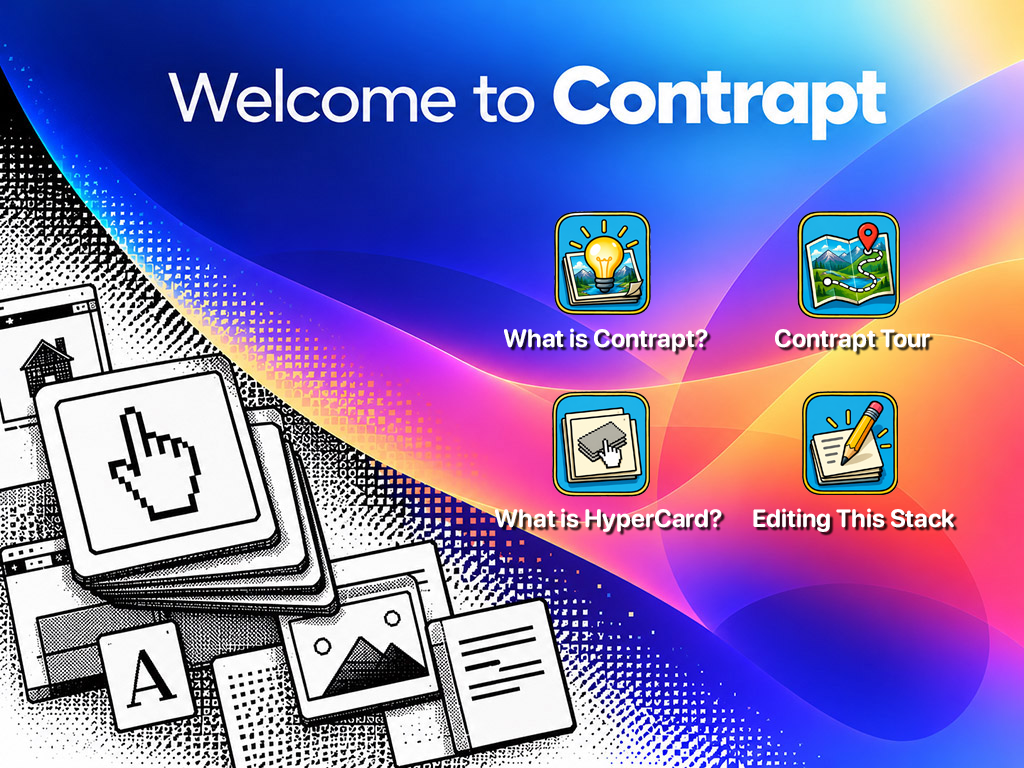
<style>
.page{position:relative;width:1024px;height:768px}
.page>*{position:absolute;margin:0}
.t1{font:25px "SFProRounded-Bold";color:#ffffff}
</style>
<div class="page">
<p class="t1" style="left:504px;top:328px;width:204px;height:24px">What is Contrapt?</p>
<p class="t1" style="left:775px;top:329px;width:155px;height:23px">Contrapt Tour</p>
<p class="t1" style="left:495px;top:508px;width:227px;height:24px">What is HyperCard?</p>
<p class="t1" style="left:753px;top:508px;width:201px;height:24px">Editing This Stack</p>
</div>
